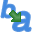
<style>
.page{position:relative;width:32px;height:32px;background:#ffffff}
.page>*{position:absolute;margin:0}
.t1{font:24px "WorkSans-Regular";color:#438ae0;font-weight:bold;font-style:italic}
.t2{font:36px "WorkSans-Regular";color:#438ae0;font-weight:bold;font-style:italic}
</style>
<div class="page">
<p class="t1" style="left:1px;top:0px;width:14px;height:18px">b</p>
<p class="t2" style="left:13px;top:11px;width:18px;height:20px">a</p>
</div>
